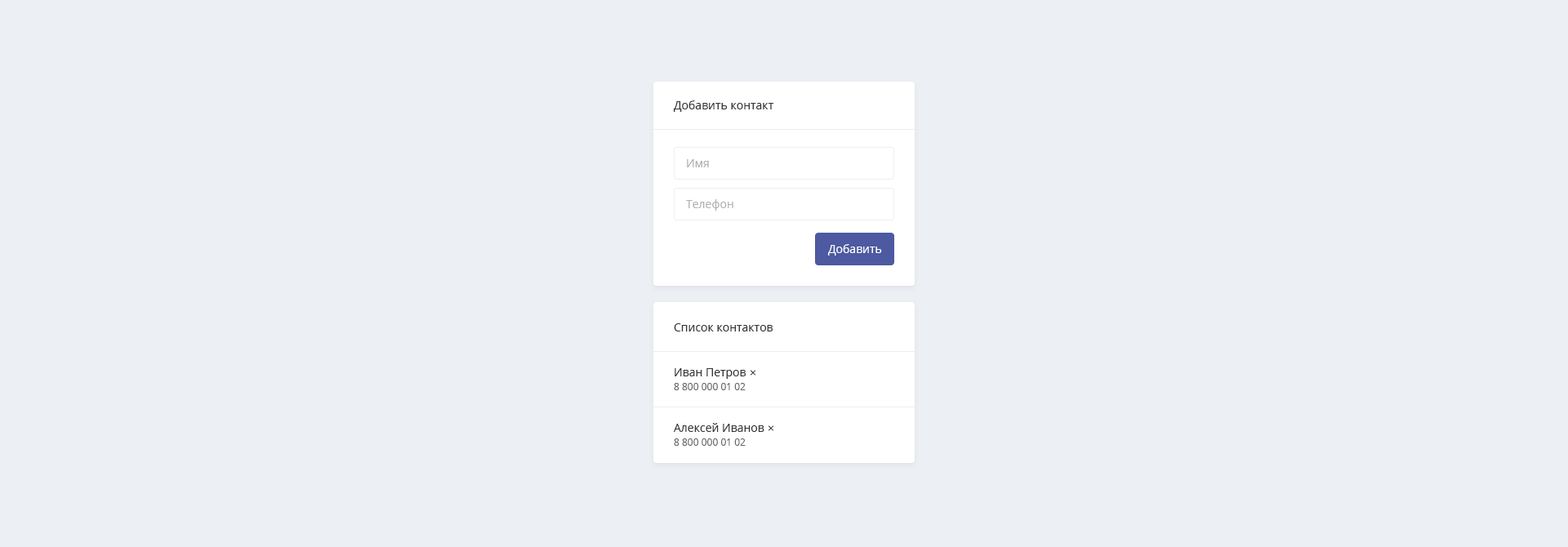
<style>
.page{position:relative;width:1568px;height:547px;background:#eceff4}
.page>*{position:absolute;margin:0}
.t1{font:11.4px "OpenSans";color:#333333}
.t2{font:11.4px "OpenSans";color:#b2b2b2}
.t3{font:11.4px "OpenSans";color:#ffffff}
.t4{font:9.8px "OpenSans";color:#666666}
</style>
<div class="page">
<p class="t1" style="left:674px;top:100px;width:100px;height:12px">Добавить контакт</p>
<p class="t2" style="left:687px;top:159px;width:22px;height:8px">Имя</p>
<p class="t2" style="left:686px;top:199px;width:47px;height:12px">Телефон</p>
<p class="t3" style="left:828px;top:244px;width:54px;height:12px">Добавить</p>
<p class="t1" style="left:674px;top:323px;width:99px;height:9px">Список контактов</p>
<p class="t1" style="left:675px;top:368px;width:71px;height:11px">Иван Петров</p>
<p class="t1" style="left:750px;top:370px;width:6px;height:6px">×</p>
<p class="t4" style="left:674px;top:383px;width:72px;height:7px">8 800 000 01 02</p>
<p class="t1" style="left:674px;top:423px;width:90px;height:9px">Алексей Иванов</p>
<p class="t1" style="left:768px;top:425px;width:6px;height:6px">×</p>
<p class="t4" style="left:674px;top:439px;width:72px;height:7px">8 800 000 01 02</p>
</div>
